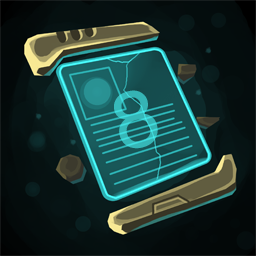
<style>
.page{position:relative;width:256px;height:256px}
.page>*{position:absolute;margin:0}
.t1{font:80.5px "Helvetica";color:#36b9b9}
</style>
<div class="page">
<p class="t1" style="left:114px;top:90px;width:44px;height:59px;rotate:-17deg">8</p>
</div>
